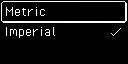
<style>
.page{position:relative;width:128px;height:64px;background:#000000}
.page>*{position:absolute;margin:0}
.t1{font:16px "PixelOperator";color:#ffffff}
</style>
<div class="page">
<p class="t1" style="left:6px;top:7px;width:40px;height:9px">Metric</p>
<p class="t1" style="left:5px;top:27px;width:50px;height:11px">Imperial</p>
</div>
